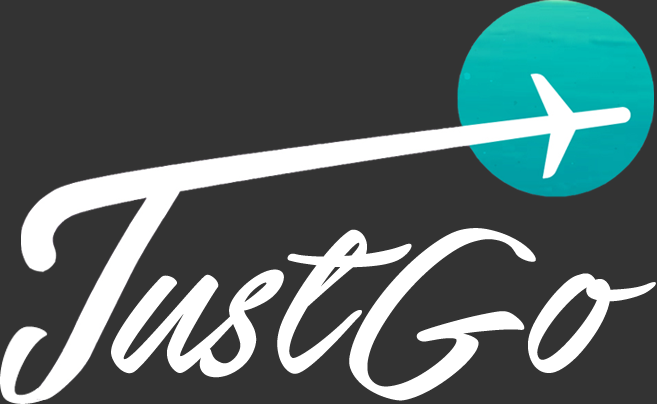
<style>
.page{position:relative;width:657px;height:404px;background:#333333}
.page>*{position:absolute;margin:0}
.t1{font:240px "StackyardPERSONALUSE";color:#ffffff}
</style>
<div class="page">
<p class="t1" style="left:111px;top:228px;width:545px;height:173px">ustGo</p>
</div>
